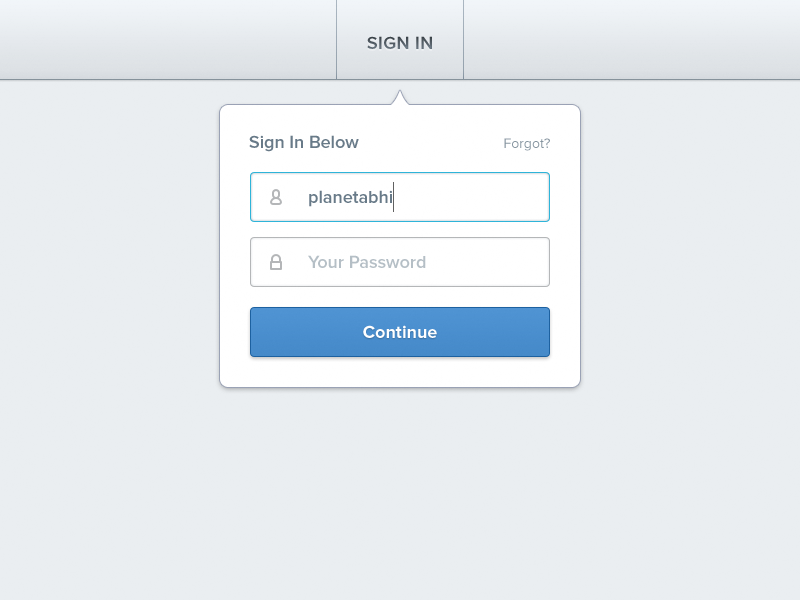
<style>
.page{position:relative;width:800px;height:600px;background:#eaeef1}
.page>*{position:absolute;margin:0}
.t1{font:18px "ProximaNova-Semibold";letter-spacing:0.025em;color:#636f79;text-transform:uppercase}
.t2{font:18px "ProximaNova-Semibold";color:#687a88}
.t3{font:14px "ProximaNova-Regular";color:#8695a0}
.t4{font:18px "ProximaNova-Semibold";color:#b5bfc6}
.t5{font:18px "ProximaNova-Bold";color:#ffffff}
</style>
<div class="page">
<p class="t1" style="left:367px;top:36px;width:65px;height:13px">Sign In</p>
<p class="t2" style="left:249px;top:135px;width:110px;height:17px">Sign In Below</p>
<p class="t3" style="left:504px;top:138px;width:46px;height:13px">Forgot?</p>
<p class="t2" style="left:309px;top:190px;width:83px;height:17px">planetabhi</p>
<p class="t4" style="left:308px;top:255px;width:118px;height:13px">Your Password</p>
<p class="t5" style="left:363px;top:325px;width:74px;height:13px">Continue</p>
</div>
